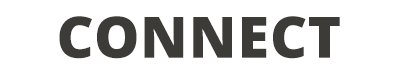
<style>
.page{position:relative;width:400px;height:74px;background:#ffffff}
.page>*{position:absolute;margin:0}
.t1{font:57.3px "OpenSans-ExtraBold";letter-spacing:0.01em;color:#3c3b38;text-transform:uppercase}
</style>
<div class="page">
<p class="t1" style="left:59px;top:16px;width:281px;height:43px">CONNECT</p>
</div>
